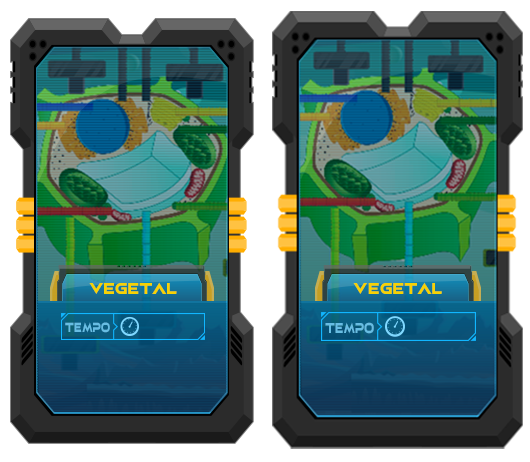
<style>
.page{position:relative;width:530px;height:462px}
.page>*{position:absolute;margin:0}
.t1{font:19.2px "elasisrg";letter-spacing:0.01em;color:#f7d203;scale:0.78 1}
.t2{font:19.4px "elasisrg";letter-spacing:0.01em;color:#f7d203;scale:0.78 1}
.t3{font:16.4px "elasisrg";letter-spacing:0.01em;color:#67bde3;scale:0.61 1}
.t4{font:17.6px "elasisrg";letter-spacing:0.01em;color:#67bde3;scale:0.61 1}
</style>
<div class="page">
<p class="t1" style="left:89px;top:282px;width:88px;height:12px">vegetal</p>
<p class="t2" style="left:353px;top:282px;width:89px;height:12px">VEGETAL</p>
<p class="t3" style="left:65px;top:322px;width:45px;height:11px">tempo</p>
<p class="t4" style="left:325px;top:322px;width:49px;height:12px">tempo</p>
</div>
